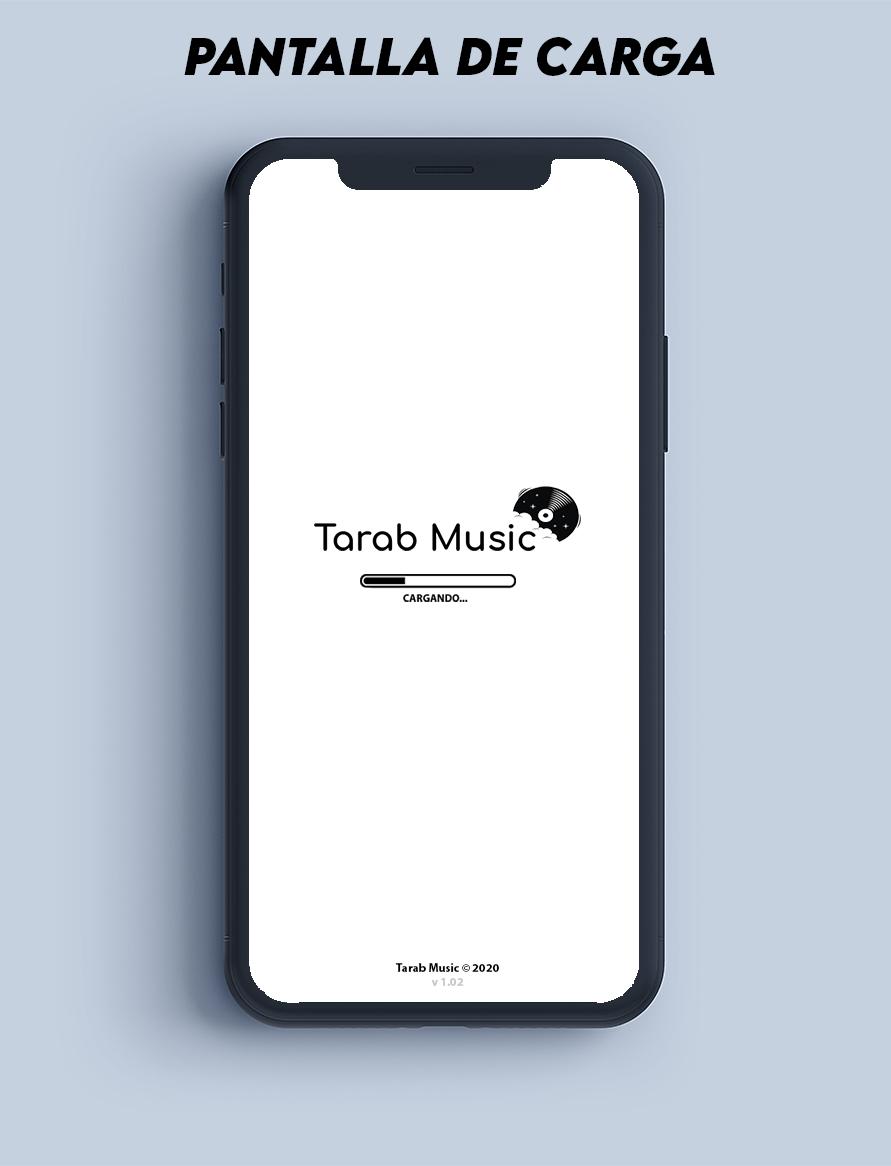
<style>
.page{position:relative;width:891px;height:1166px;background:#c5d1df}
.page>*{position:absolute;margin:0}
.t1{font:47px "LEMONMILK-BoldItalic";color:#000000}
.t2{font:12px "MyriadPro-Bold";color:#000000}
.t3{font:12px "MyriadPro-Bold";color:#c6c6c6}
</style>
<div class="page">
<p class="t1" style="left:184px;top:37px;width:531px;height:39px">PANTALLA DE CARGA</p>
<p class="t2" style="left:395px;top:963px;width:104px;height:23px;text-align:center">Tarab Music © 2020<br><span class="t3">v 1.02</span></p>
</div>
